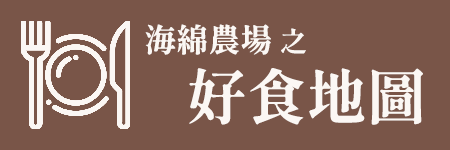
<style>
.page{position:relative;width:450px;height:150px;background:#795548}
.page>*{position:absolute;margin:0}
.t1{font:32px "ShipporiMinchoB1-Bold";color:#fbf7f4}
.t2{font:28px "ShipporiMinchoB1-Bold";color:#fbf7f4}
.t3{font:60px "ShipporiMinchoB1-Bold";color:#fbf7f4}
</style>
<div class="page">
<p class="t1" style="left:145px;top:24px;width:161px;height:31px">海綿農場<span class="t2"> 之</span></p>
<p class="t3" style="left:189px;top:68px;width:234px;height:57px">好食地圖</p>
</div>
